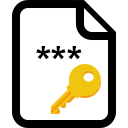
<style>
.page{position:relative;width:128px;height:128px;background:#ffffff}
.page>*{position:absolute;margin:0}
.t1{font:40px "Arial-BoldMT";color:#000000}
</style>
<div class="page">
<p class="t1" style="left:36px;top:46px;width:46px;height:14px">***</p>
</div>
